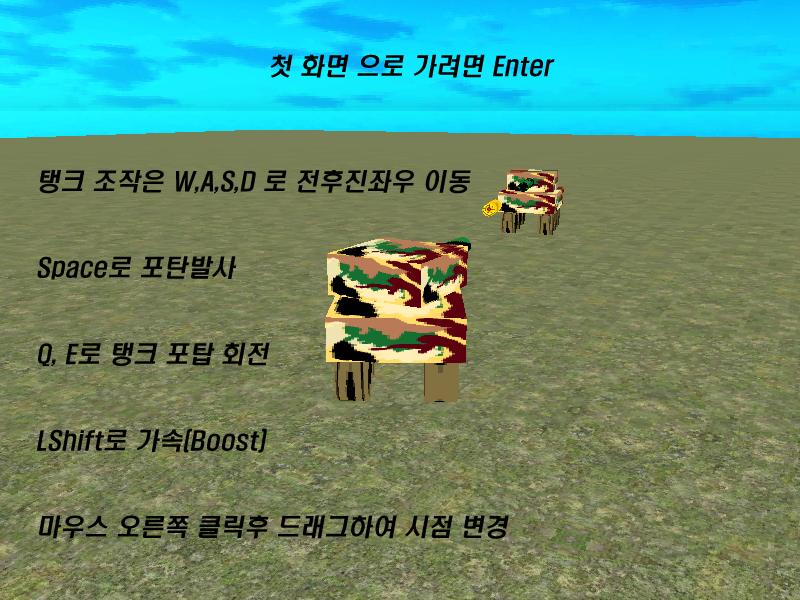
<style>
.page{position:relative;width:800px;height:600px}
.page>*{position:absolute;margin:0}
.t1{font:24px "H2hdrM";color:#010100;font-style:italic}
</style>
<div class="page">
<p class="t1" style="left:37px;top:54px;width:518px;height:485px">첫 화면 으로 가려면 Enter<br><br><br><br> 탱크 조작은 W,A,S,D 로 전후진좌우 이동<br><br><br> Space로 포탄발사<br><br><br> Q, E로 탱크 포탑 회전<br><br><br> LShift로 가속(Boost)<br><br><br> 마우스 오른쪽 클릭후 드래그하여 시점 변경</p>
</div>
